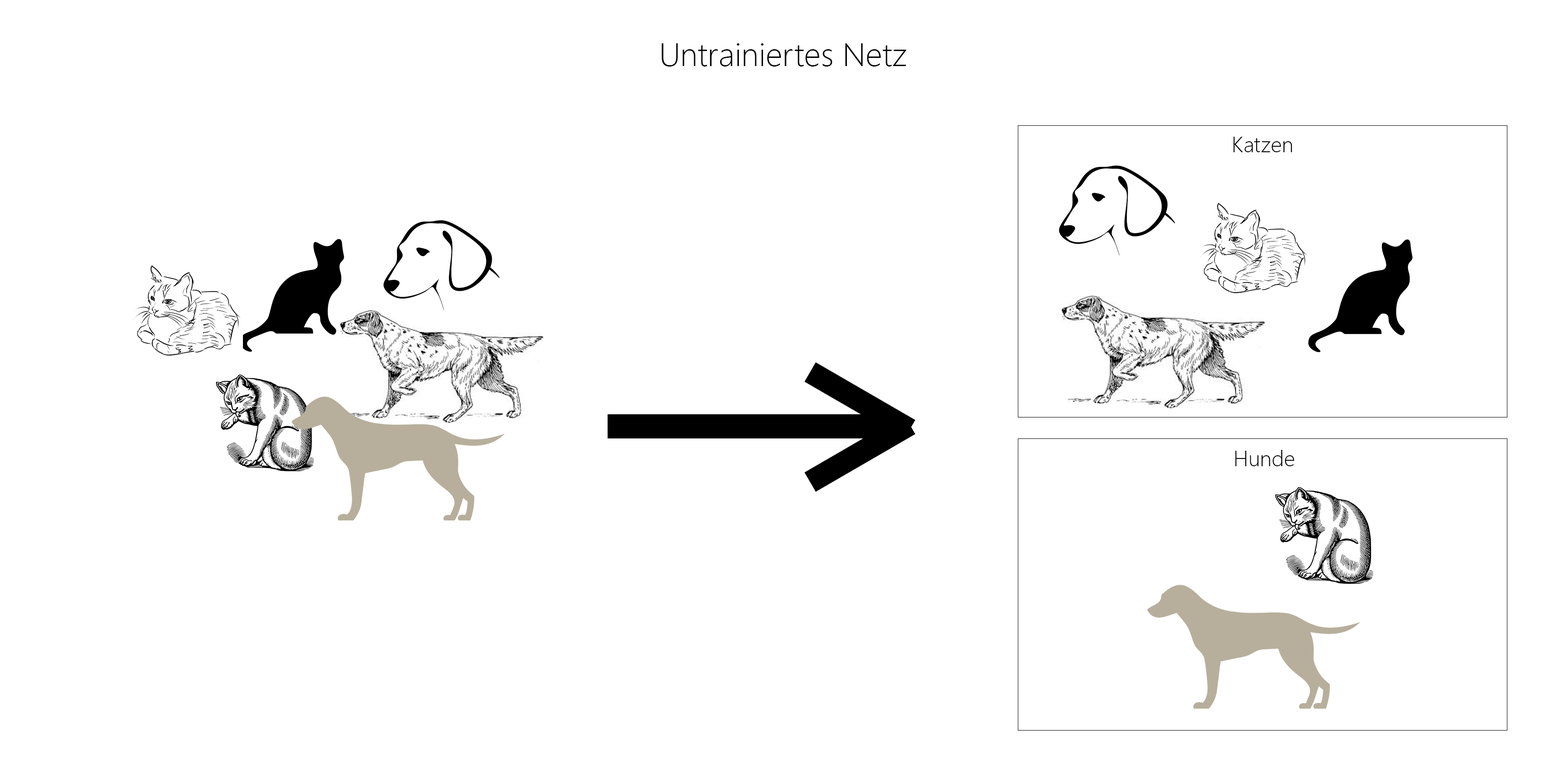
<style>
.page{position:relative;width:1568px;height:757px;background:#ffffff}
.page>*{position:absolute;margin:0}
.t1{font:32.8px "SegoeUI-Light";color:#000000}
.t2{font:21.9px "SegoeUI-Light";color:#000000}
</style>
<div class="page">
<p class="t1" style="left:661px;top:43px;width:246px;height:24px">Untrainiertes Netz</p>
<p class="t2" style="left:1233px;top:137px;width:59px;height:15px">Katzen</p>
<p class="t2" style="left:1235px;top:450px;width:60px;height:16px">Hunde</p>
</div>
